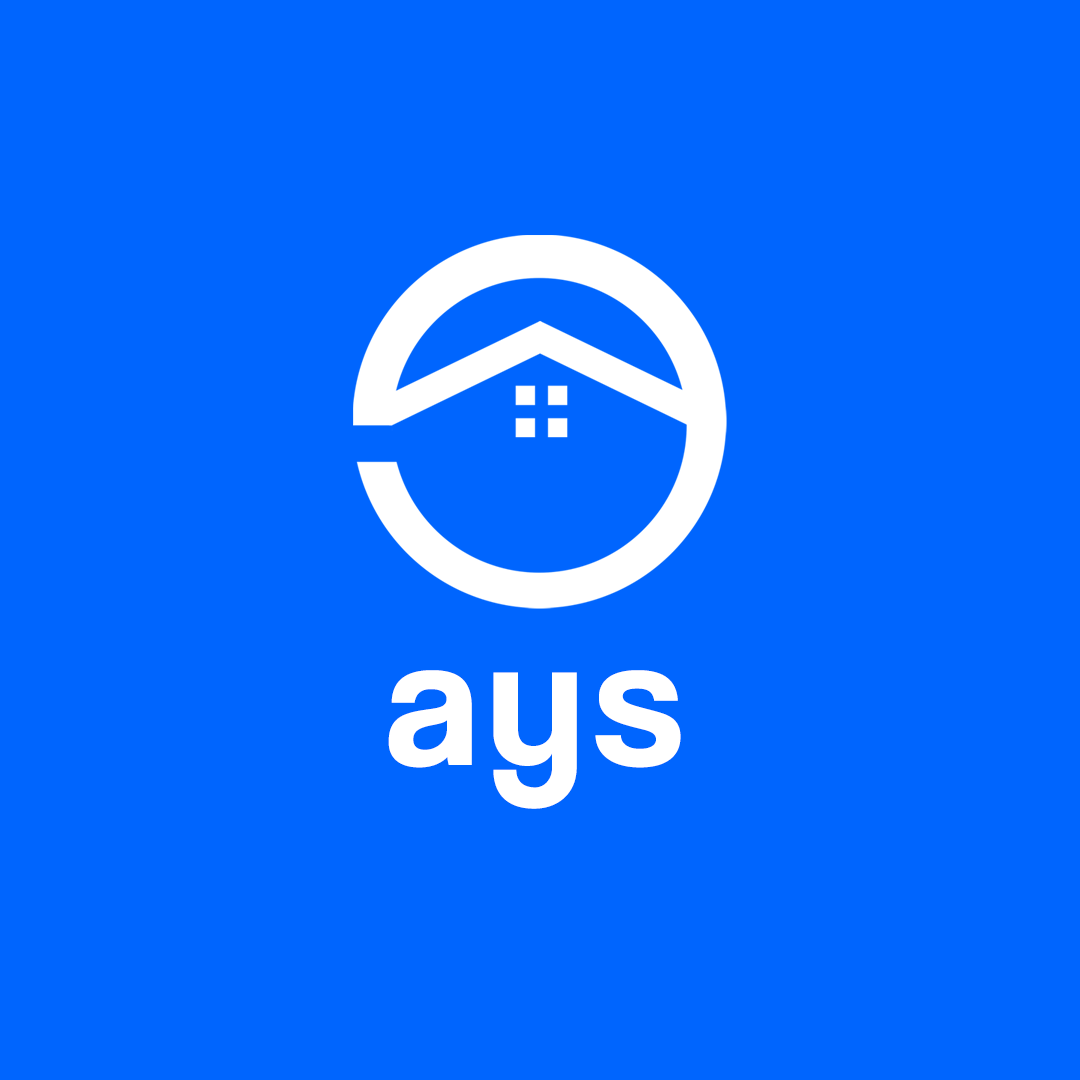
<style>
.page{position:relative;width:1080px;height:1080px;background:#0065fe}
.page>*{position:absolute;margin:0}
.t1{font:187.4px "CoolveticaRg-Regular";letter-spacing:0.06em;color:#ffffff}
</style>
<div class="page">
<p class="t1" style="left:388px;top:670px;width:293px;height:139px">ays</p>
</div>
